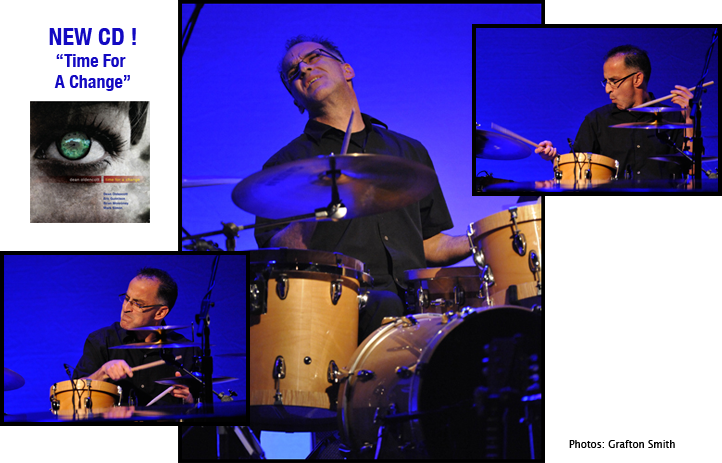
<style>
.page{position:relative;width:722px;height:463px;background:#ffffff}
.page>*{position:absolute;margin:0}
.t1{font:18px "HelveticaNeue-CondensedBold";color:#1309c2}
.t2{font:24px "HelveticaNeue-CondensedBold";color:#1309c2}
.t3{font:10px "LucidaGrande";color:#000000}
</style>
<div class="page">
<p class="t1" style="left:49px;top:28px;width:87px;height:63px;text-align:center"><span class="t2">NEW CD !<br></span>“Time For <br>A Change”</p>
<p class="t3" style="left:569px;top:440px;width:106px;height:8px">Photos: Grafton Smith</p>
</div>
